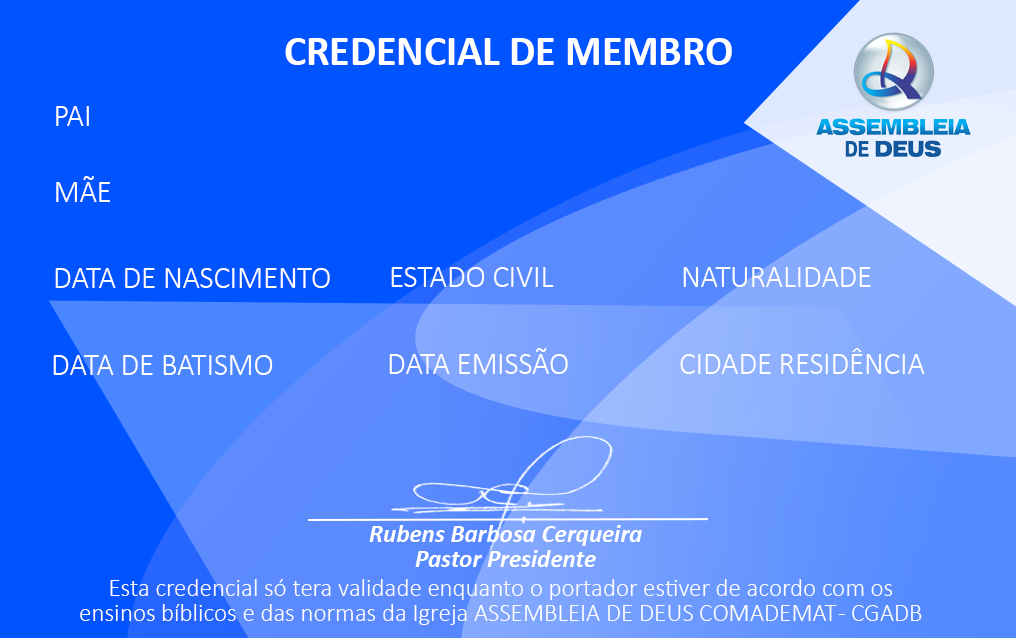
<style>
.page{position:relative;width:1016px;height:638px;background:#0054ff}
.page>*{position:absolute;margin:0}
.t1{font:41.7px "Calibri-Bold";color:#ffffff}
.t2{font:30.5px "Calibri-Light";color:#ffffff}
.t3{font:25px/25px "Calibri-BoldItalic";color:#ffffff}
.t4{font:25px/25px "Calibri-Light";color:#ffffff}
</style>
<div class="page">
<p class="t1" style="left:285px;top:38px;width:447px;height:27px">CREDENCIAL DE MEMBRO</p>
<p class="t2" style="left:56px;top:106px;width:33px;height:20px">PAI</p>
<p class="t2" style="left:56px;top:176px;width:54px;height:26px">MÃE</p>
<p class="t2" style="left:55px;top:268px;width:275px;height:20px">DATA DE NASCIMENTO</p>
<p class="t2" style="left:391px;top:267px;width:163px;height:20px">ESTADO CIVIL</p>
<p class="t2" style="left:683px;top:267px;width:188px;height:20px">NATURALIDADE</p>
<p class="t2" style="left:389px;top:348px;width:179px;height:26px">DATA EMISSÃO</p>
<p class="t2" style="left:680px;top:348px;width:245px;height:26px">CIDADE RESIDÊNCIA</p>
<p class="t2" style="left:53px;top:355px;width:220px;height:20px">DATA DE BATISMO</p>
<p class="t3" style="left:369px;top:525px;width:273px;height:42px;text-align:center">Rubens Barbosa Cerqueira<br>Pastor Presidente</p>
<p class="t4" style="left:80px;top:579px;width:842px;height:46px;text-align:center">Esta credencial só tera validade enquanto o portador estiver de acordo com os <br>ensinos bíblicos e das normas da Igreja ASSEMBLEIA DE DEUS COMADEMAT - CGADB</p>
</div>
